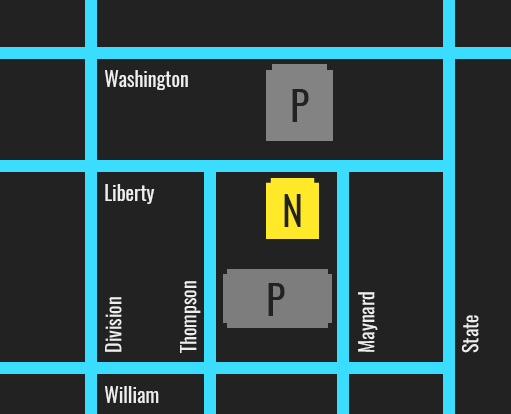
<style>
.page{position:relative;width:511px;height:414px;background:#222222}
.page>*{position:absolute;margin:0}
.t1{font:20px "Oswald-Regular";color:#eeeeee}
.t2{font:40px "Oswald-Regular";color:#222222}
.t3{font:20.1px "Oswald-Regular";color:#eeeeee}
</style>
<div class="page">
<p class="t1" style="left:105px;top:70px;width:83px;height:20px">Washington</p>
<p class="t2" style="left:292px;top:89px;width:17px;height:33px">P</p>
<p class="t1" style="left:105px;top:184px;width:50px;height:20px">Liberty</p>
<p class="t2" style="left:284px;top:194px;width:17px;height:33px">N</p>
<p class="t3" style="left:180px;top:281px;width:21px;height:72px;rotate:-90deg">Thompson</p>
<p class="t2" style="left:268px;top:283px;width:17px;height:33px">P</p>
<p class="t3" style="left:358px;top:292px;width:20px;height:60px;rotate:-90deg">Maynard</p>
<p class="t3" style="left:105px;top:297px;width:17px;height:55px;rotate:-90deg">Division</p>
<p class="t3" style="left:461px;top:315px;width:18px;height:38px;rotate:-90deg">State</p>
<p class="t1" style="left:105px;top:386px;width:54px;height:17px">William</p>
</div>
